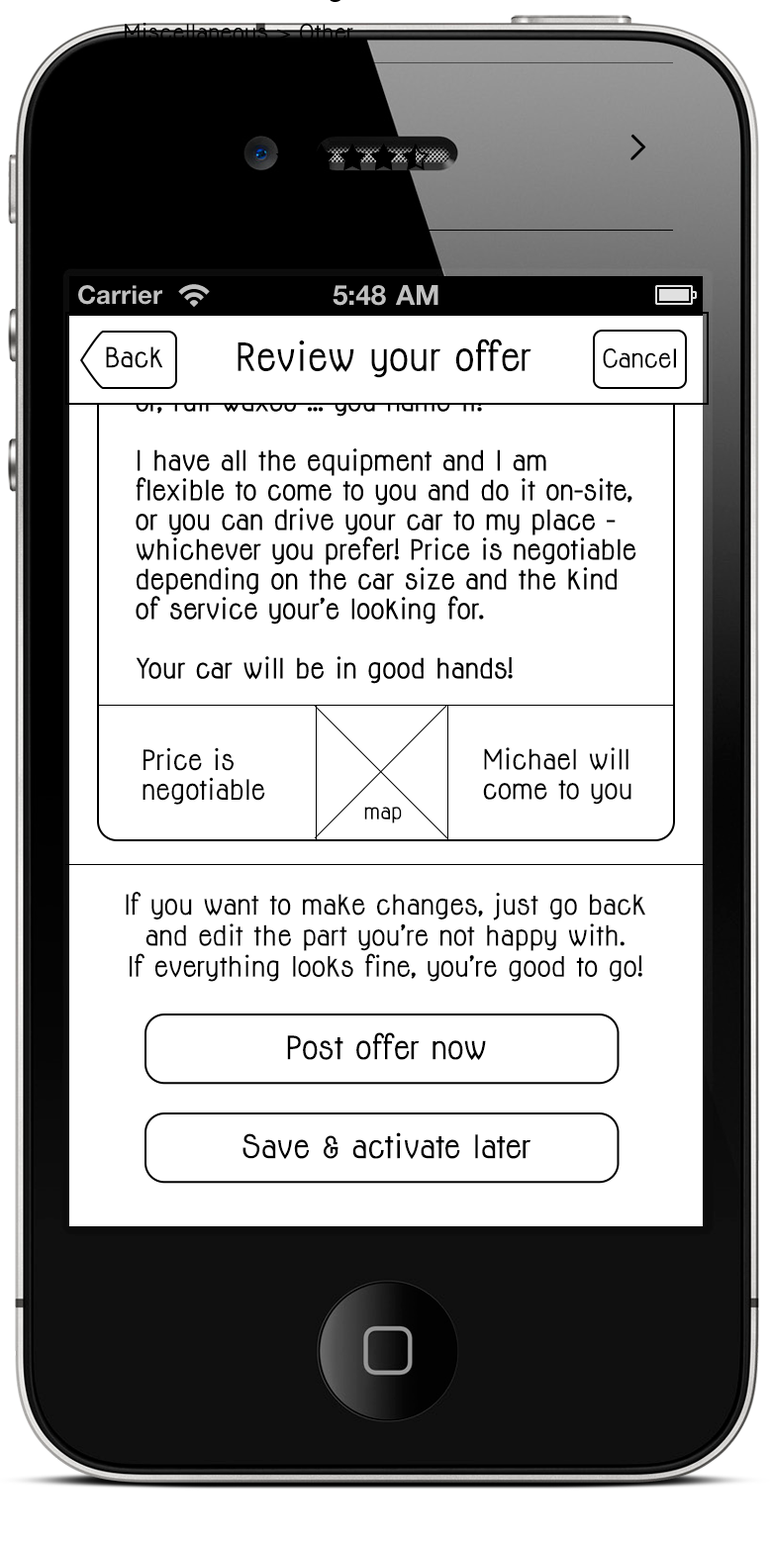
<style>
.page{position:relative;width:772px;height:1545px;background:#ffffff}
.page>*{position:absolute;margin:0}
.t1{font:21.8px "Jolly-Bold";color:#000000}
.t2{font:35.6px "Jolly-Bold";color:#000000}
.t3{font:25.7px "Jolly-Bold";color:#000000}
.t4{font:23.8px "Jolly-Bold";color:#000000}
.t5{font:25.7px/29.7px "Jolly-Bold";color:#000000}
.t6{font:19.8px "Jolly-Bold";color:#000000}
.t7{font:29.8px "Jolly-Bold";color:#000000}
</style>
<div class="page">
<p class="t1" style="left:125px;top:23px;width:228px;height:19px">Miscellaneous &gt; Other</p>
<p class="t2" style="left:238px;top:338px;width:293px;height:40px">Review your offer</p>
<p class="t3" style="left:106px;top:346px;width:57px;height:22px">Back</p>
<p class="t4" style="left:603px;top:348px;width:73px;height:20px">Cancel</p>
<p class="t5" style="left:143px;top:747px;width:122px;height:58px">Price is<br>negotiable</p>
<p class="t5" style="left:483px;top:747px;width:148px;height:58px">Michael will come to you</p>
<p class="t6" style="left:364px;top:807px;width:38px;height:16px">map</p>
<p class="t3" style="left:126px;top:892px;width:519px;height:90px;text-align:center">If you want to make changes, just go back <br>and edit the part you’re not happy with. <br>If everything looks fine, you’re good to go!</p>
<p class="t7" style="left:287px;top:1032px;width:199px;height:28px">Post offer now</p>
<p class="t7" style="left:242px;top:1132px;width:288px;height:27px">Save &amp; activate later</p>
</div>
